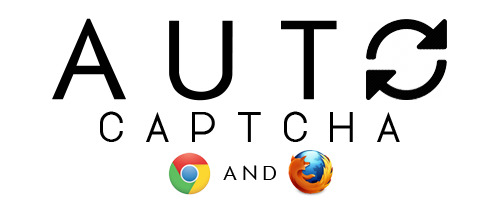
<style>
.page{position:relative;width:500px;height:200px;background:#ffffff}
.page>*{position:absolute;margin:0}
.t1{font:106.6px "FuturistFixedWidth-Regular";color:#000000;font-weight:bold}
.t2{font:38.5px "LottePaperfang";letter-spacing:0.4em;color:#000000}
.t3{font:19.4px "FuturistFixedWidth-Regular";color:#000000;text-transform:uppercase}
</style>
<div class="page">
<p class="t1" style="left:52px;top:18px;width:285px;height:83px">AUT</p>
<p class="t2" style="left:100px;top:111px;width:300px;height:31px">captcha</p>
<p class="t3" style="left:223px;top:165px;width:53px;height:15px">and</p>
</div>
